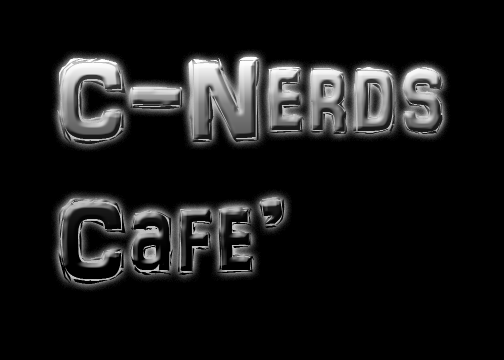
<style>
.page{position:relative;width:504px;height:360px;background:#000000}
.page>*{position:absolute;margin:0}
.t1{font:116.5px "ARDARLING";scale:0.84 1}
</style>
<div class="page">
<p class="t1" style="left:57px;top:57px;width:387px;height:227px">C-Nerds <br>Cafe’</p>
</div>
